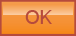
<style>
.page{position:relative;width:76px;height:36px}
.page>*{position:absolute;margin:0}
.t1{font:30px "Kartika";color:#b64b3c}
</style>
<div class="page">
<p class="t1" style="left:25px;top:10px;width:27px;height:14px">OK</p>
</div>
